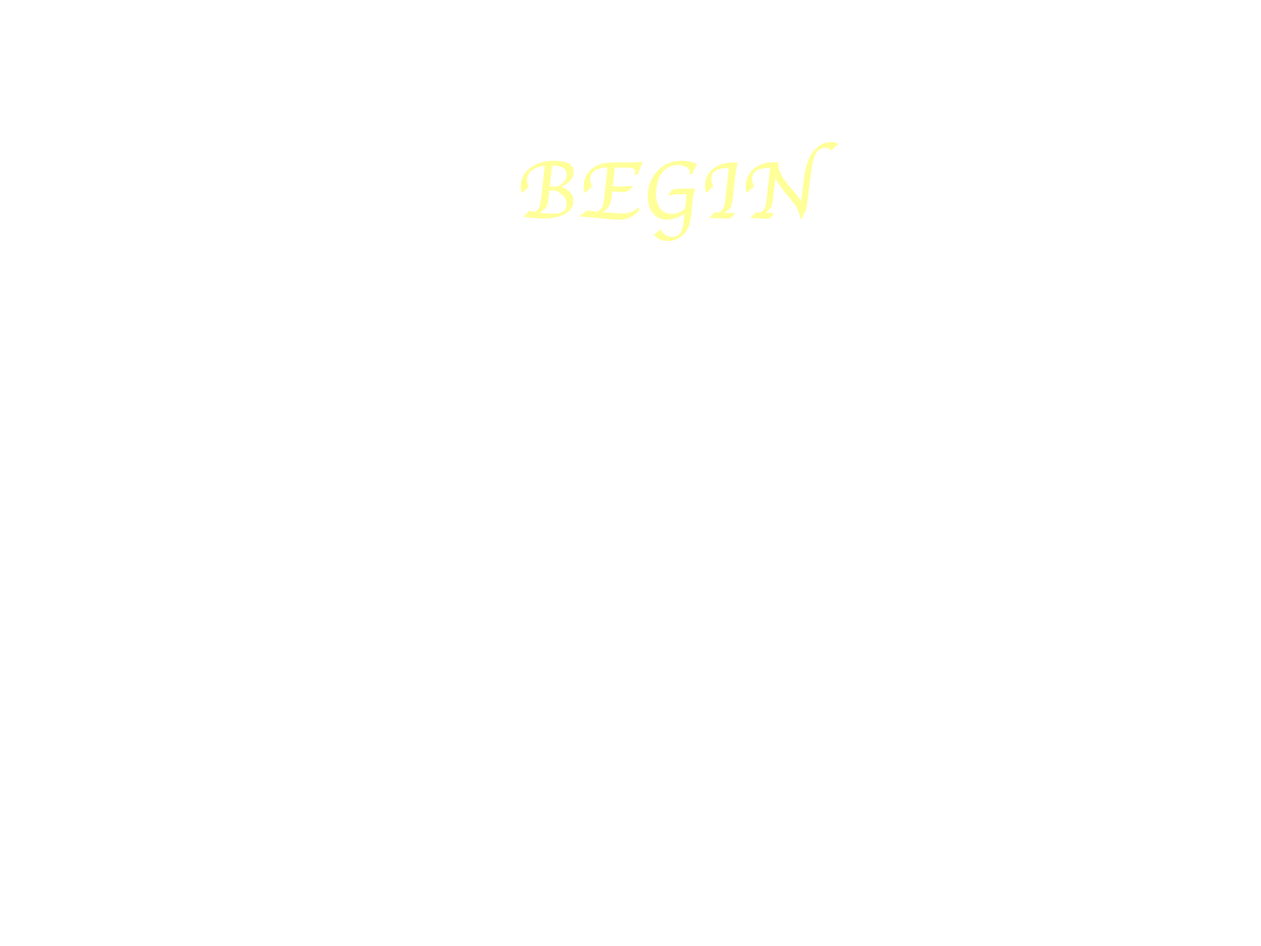
<style>
.page{position:relative;width:1261px;height:946px;background:#ffffff}
.page>*{position:absolute;margin:0}
.t1{font:83.4px "Apple-Chancery";letter-spacing:0.005em;color:#ffff99;font-weight:bold}
</style>
<div class="page">
<p class="t1" style="left:520px;top:141px;width:318px;height:100px">BEGIN</p>
</div>
